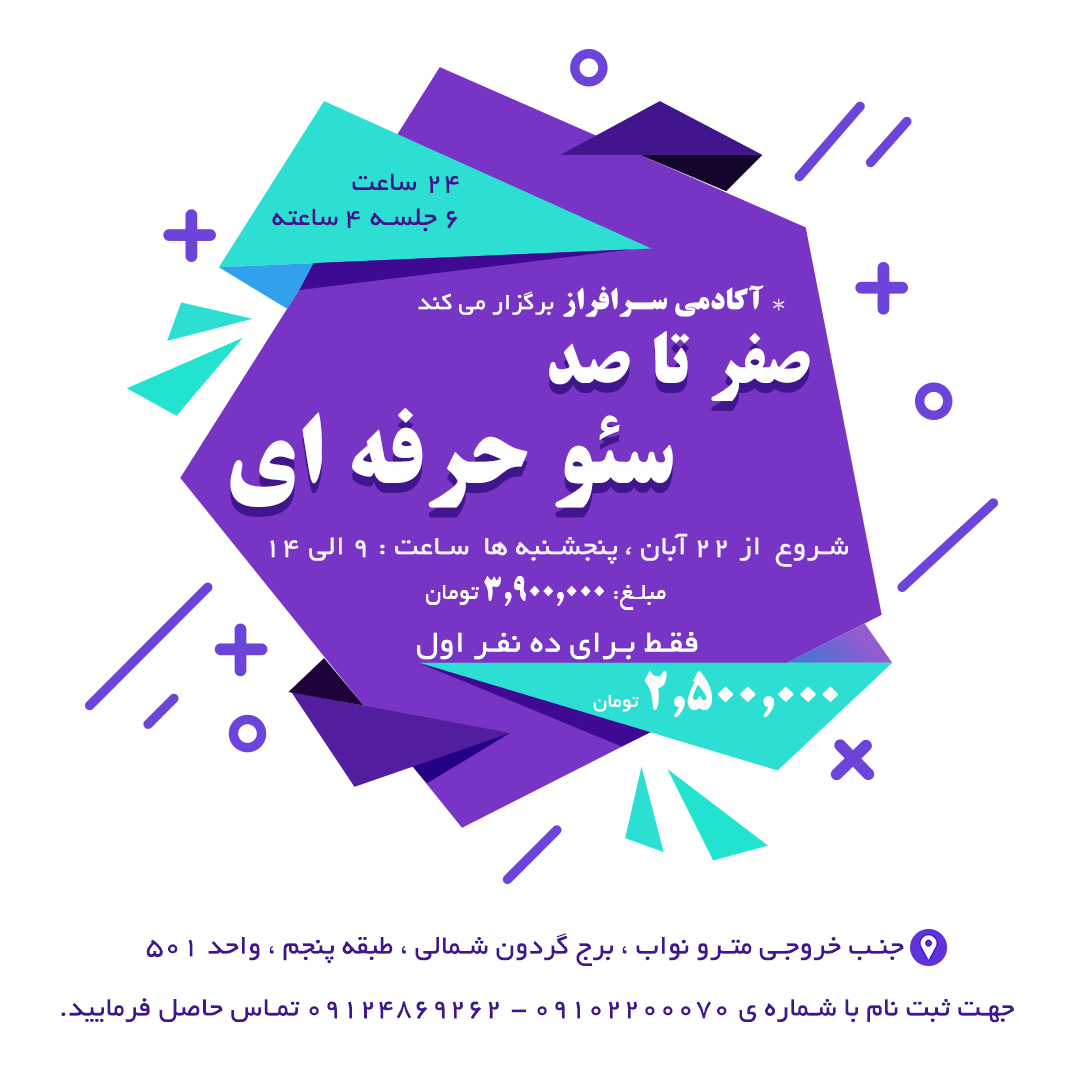
<style>
.page{position:relative;width:1080px;height:1080px;background:#ffffff}
.page>*{position:absolute;margin:0}
.t1{font:29.2px "BYekan";letter-spacing:0.025em;color:#40158e}
.t2{font:29.2px "BYekan";letter-spacing:0.025em;color:#f3f0f9;scale:1.04 1}
.t3{font:29.2px "BYekan";letter-spacing:0.025em;color:#fefefe;scale:1.04 1}
.t4{font:37.5px "BYekan";letter-spacing:0.025em;color:#fefefe;scale:1.04 1}
.t5{font:29.2px "2--TitrBold";letter-spacing:0.025em;color:#fefefe;scale:1.04 1}
.t6{font:25px "BYekan";letter-spacing:0.025em;color:#fefefe;scale:1.04 1}
.t7{font:29.2px "MyriadArabic-Regular";letter-spacing:0.025em;color:#f3f0f9;scale:1.04 1}
.t8{font:95.8px/100px "2--TitrBold";letter-spacing:0.025em;color:#fefefe}
.t9{font:70.8px/100px "2--TitrBold";letter-spacing:0.025em;color:#fefefe}
.t10{font:29.2px "2--TitrBold";letter-spacing:0.025em;color:#fdfdfd}
.t11{font:25px "BYekan";letter-spacing:0.025em;color:#fdfdfd}
.t12{font:33.3px "BYekan";letter-spacing:0.025em;color:#fefefe;scale:1.03 1}
.t13{font:45.8px "2--TitrBold";letter-spacing:0.025em;color:#fefefe;scale:1.03 1}
.t14{font:20.8px "BYekan";letter-spacing:0.025em;color:#fefefe;scale:1.03 1}
.t15{font:25px "BYekan";letter-spacing:0.025em;color:#40158e}
</style>
<div class="page">
<p class="t1" style="left:272px;top:173px;width:187px;height:59px">24 ساعت <br>6 جلسه 4 ساعته</p>
<p class="t2" style="left:270px;top:285px;width:578px;height:282px"><span class="t3">       </span><span class="t4">   * </span><span class="t5">آکادمی سرافراز </span><span class="t6">برگزار می کند<br>   <br><br><br><br><br><br>  </span>شروع  از 22 آبان <span class="t7">، </span>پنجشنبه ها  ساعت : 9 الی 14  <br>                           <br><br><br><br><br><br><span class="t3">دماتی</span></p>
<p class="t8" style="left:230px;top:331px;width:580px;height:177px"><span class="t9">صفر تا صد<br>     </span> سئو حرفه ای</p>
<p class="t10" style="left:426px;top:576px;width:240px;height:34px"><span class="t11"> مبلغ: </span>3,900,000<span class="t11"> تومان</span></p>
<p class="t12" style="left:417px;top:632px;width:421px;height:85px">فقط برای ده نفر اول<br> <span class="t13">2,500,000 </span><span class="t14">تومان</span></p>
<p class="t1" style="left:146px;top:933px;width:758px;height:33px">جنب خروجی مترو نواب ، برج گردون شمالی ، طبقه پنجم ، واحد 501</p>
<p class="t1" style="left:61px;top:998px;width:953px;height:25px"><span class="t15"><br></span>جهت ثبت نام با شماره ی 09102200070 - 09124869262 تماس حاصل فرمایید.</p>
</div>
